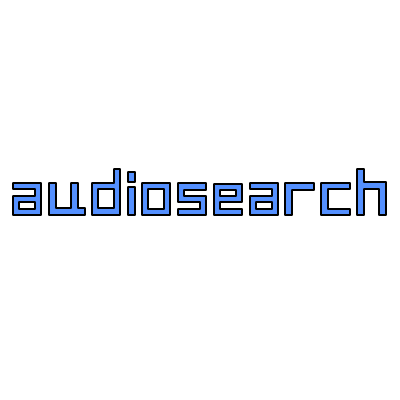
<style>
.page{position:relative;width:400px;height:400px;background:#ffffff}
.page>*{position:absolute;margin:0}
.t1{font:60px "AMOceanus-Bold";color:#5490ff}
</style>
<div class="page">
<p class="t1" style="left:13px;top:169px;width:373px;height:46px">a u d i o s e a r c h</p>
</div>
